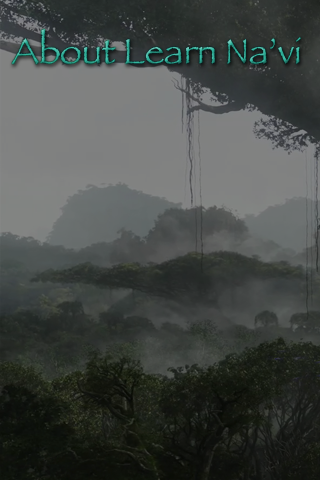
<style>
.page{position:relative;width:320px;height:480px}
.page>*{position:absolute;margin:0}
.t1{font:36px "Papyrus";color:#30b39c}
</style>
<div class="page">
<p class="t1" style="left:11px;top:29px;width:290px;height:36px">About Learn Na’vi</p>
</div>
